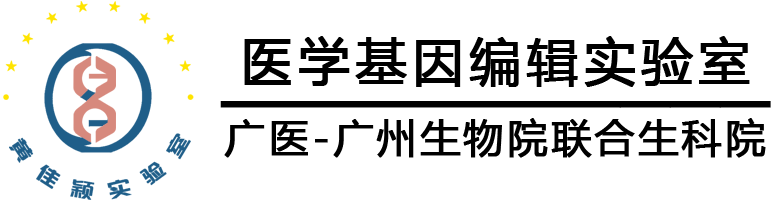
<style>
.page{position:relative;width:779px;height:200px;background:#ffffff}
.page>*{position:absolute;margin:0}
.t1{font:40.1px/40.8px "MicrosoftYaHei";letter-spacing:0.06em;color:#000000;font-weight:bold}
.t2{font:50.8px/40.8px "MicrosoftYaHei";letter-spacing:0.1em;color:#000000;font-weight:bold}
.t3{font:48.6px/40.8px "Impact";color:#000000;font-weight:bold}
</style>
<div class="page">
<p class="t1" style="left:220px;top:36px;width:551px;height:122px;text-align:center"><span class="t2">医学基因编辑实验室<br></span><span class="t3">———————————<br></span>广医-广州生物院联合生科院</p>
</div>
